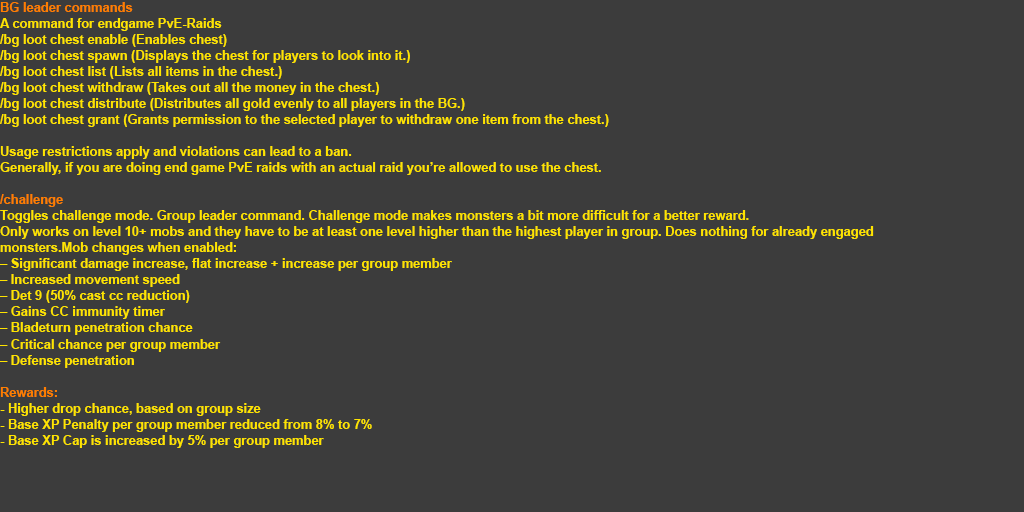
<style>
.page{position:relative;width:1024px;height:512px;background:#3c3c3c}
.page>*{position:absolute;margin:0}
.t1{font:13.3px "Arial-BoldMT";color:#ffe400;scale:0.97 1}
.t2{font:13.3px "Arial-BoldMT";color:#ff7e00;scale:0.97 1}
</style>
<div class="page">
<p class="t1" style="left:0px;top:2px;width:874px;height:446px"><span class="t2">BG leader commands<br></span>A command for endgame PvE-Raids<br>/bg loot chest enable (Enables chest)<br>/bg loot chest spawn (Displays the chest for players to look into it.)<br>/bg loot chest list (Lists all items in the chest.)<br>/bg loot chest withdraw (Takes out all the money in the chest.)<br>/bg loot chest distribute (Distributes all gold evenly to all players in the BG.)<br>/bg loot chest grant (Grants permission to the selected player to withdraw one item from the chest.)<br> <br>Usage restrictions apply and violations can lead to a ban.<br>Generally, if you are doing end game PvE raids with an actual raid you’re allowed to use the chest.<br><br><span class="t2">/challenge<br></span>Toggles challenge mode. Group leader command. Challenge mode makes monsters a bit more difficult for a better reward.<br>Only works on level 10+ mobs and they have to be at least one level higher than the highest player in group. Does nothing for already engaged <br>monsters.Mob changes when enabled:<br>– Significant damage increase, flat increase + increase per group member<br>– Increased movement speed<br>– Det 9 (50% cast cc reduction)<br>– Gains CC immunity timer<br>– Bladeturn penetration chance<br>– Critical chance per group member<br>– Defense penetration<br><br><span class="t2">Rewards:<br></span>- Higher drop chance, based on group size<br>- Base XP Penalty per group member reduced from 8% to 7%<br>- Base XP Cap is increased by 5% per group member</p>
</div>
